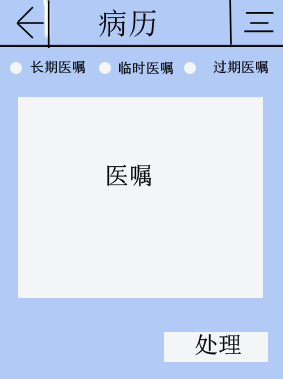
<style>
.page{position:relative;width:283px;height:379px;background:#f4f5f7}
.page>*{position:absolute;margin:0}
.t1{font:30.1px "SimSun";color:#000000}
.t2{font:14px "SimSun";color:#000206}
.t3{font:24px "SimSun";color:#000206}
</style>
<div class="page">
<p class="t1" style="left:99px;top:9px;width:57px;height:28px">病历</p>
<p class="t2" style="left:30px;top:60px;width:55px;height:14px">长期医嘱</p>
<p class="t2" style="left:119px;top:61px;width:54px;height:14px">临时医嘱</p>
<p class="t2" style="left:213px;top:60px;width:55px;height:14px">过期医嘱</p>
<p class="t3" style="left:107px;top:164px;width:45px;height:23px">医嘱</p>
<p class="t3" style="left:195px;top:334px;width:46px;height:21px">处理</p>
</div>
